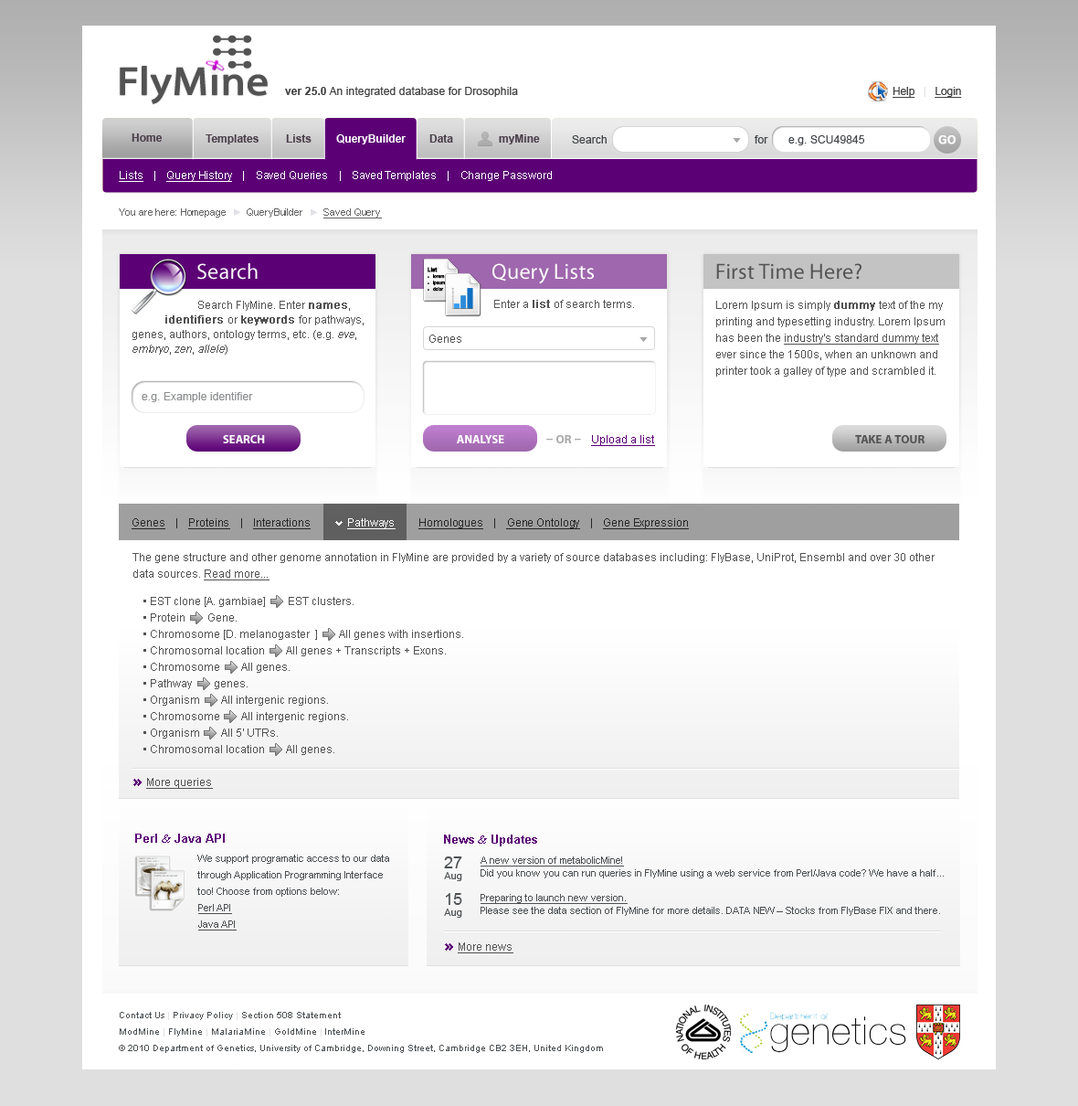
<style>
.page{position:relative;width:1078px;height:1106px;background:#ffffff}
.page>*{position:absolute;margin:0}
.t1{font:11px "ArialMT";letter-spacing:0.01em;color:#404040}
.t2{font:11px "Arial-BoldMT";letter-spacing:0.01em;color:#404040}
.t3{font:11px "ArialMT";letter-spacing:-0.01em;color:#404040;text-decoration:underline}
.t4{font:11px "ArialMT";letter-spacing:-0.01em;color:#e2e1e6}
.t5{font:11px "Arial-BoldMT";color:#4b3f4b}
.t6{font:11px "Arial-BoldMT";color:#ffffff}
.t7{font:11px "ArialMT";letter-spacing:0.01em;color:#424649}
.t8{font:6px "ArialMT";letter-spacing:0.01em;color:#a7a7a7;scale:1.67 1}
.t9{font:11px "Arial-BoldMT";letter-spacing:0.01em;color:#ffffff;text-transform:uppercase;font-weight:bold}
.t10{font:11px "ArialMT";letter-spacing:-0.01em;color:#ffffff}
.t11{font:11px "ArialMT";letter-spacing:-0.01em;color:#ffffff;text-decoration:underline}
.t12{font:10.1px "ArialMT";letter-spacing:-0.01em;color:#656565}
.t13{font:10.1px "ArialMT";color:#656565}
.t14{font:10.1px "ArialMT";letter-spacing:-0.01em;color:#e2e1e6}
.t15{font:10.1px "ArialMT";letter-spacing:-0.01em;color:#656565;text-decoration:underline}
.t16{font:21.9px "MyriadPro-Regular";letter-spacing:0.01em;color:#ffffff}
.t17{font:21.9px "MyriadPro-Regular";letter-spacing:0.01em;color:#535353}
.t18{font:11px/14.6px "ArialMT";color:#535353}
.t19{font:11px/14.6px "ArialMT";color:#535353;font-weight:bold}
.t20{font:11px/14.6px "ArialMT";color:#535353;font-style:italic}
.t21{font:11px "ArialMT";color:#535353}
.t22{font:11px "ArialMT";color:#535353;font-weight:bold}
.t23{font:11px/16.4px "ArialMT";color:#535353}
.t24{font:11px/16.4px "ArialMT";color:#535353;font-weight:bold}
.t25{font:11px/16.4px "ArialMT";color:#535353;text-decoration:underline}
.t26{font:11px "ArialMT";letter-spacing:0.01em;color:#8e9092}
.t27{font:11.9px "MyriadPro-Bold";color:#ffffff;text-transform:uppercase}
.t28{font:11.9px "MyriadPro-Bold";color:#a9a9a9;text-transform:uppercase}
.t29{font:11.9px "MyriadPro-Bold";color:#a9a9a9;text-transform:uppercase;scale:2 1}
.t30{font:11px "ArialMT";color:#5c0075;text-decoration:underline}
.t31{font:11.9px "MyriadPro-Bold";color:#535353;text-transform:uppercase}
.t32{font:11px "ArialMT";letter-spacing:-0.01em;color:#282626;text-decoration:underline}
.t33{font:11px "ArialMT";letter-spacing:-0.01em;color:#292727;text-decoration:underline}
.t34{font:11px "ArialMT";letter-spacing:-0.01em;color:#292727}
.t35{font:11px "ArialMT";letter-spacing:-0.01em;color:#282626}
.t36{font:11px "ArialMT";color:#535353;text-decoration:underline}
.t37{font:11.9px "Arial-BoldMT";color:#5c0075}
.t38{font:11.9px "TimesNewRomanPSMT";color:#5c0075;font-style:italic}
.t39{font:10.1px/16.4px "ArialMT";color:#4d5154}
.t40{font:10.1px/16.4px "ArialMT";color:#4d5154;text-decoration:underline}
.t41{font:10.1px/11px "ArialMT";color:#4d5154}
.t42{font:16.4px/11px "ArialMT";color:#4d5154}
.t43{font:16.4px/14.6px "ArialMT";color:#4d5154}
.t44{font:10.1px/12.8px "ArialMT";color:#4d5154}
.t45{font:10.1px/12.8px "ArialMT";color:#4d5154;text-decoration:underline}
.t46{font:10.1px/24.7px "ArialMT";color:#4d5154;text-decoration:underline}
.t47{font:9.1px/16.4px "ArialMT";color:#4d5154}
.t48{font:9.1px "ArialMT";letter-spacing:-0.01em;color:#e2e1e6}
.t49{font:9.1px "ArialMT";color:#4d5154}
</style>
<div class="page">
<p class="t1" style="left:285px;top:87px;width:233px;height:10px"><span class="t2">ver 25.0</span> An integrated database for Drosophila</p>
<p class="t3" style="left:893px;top:87px;width:69px;height:11px">Help   <span class="t4">|   </span>Login</p>
<p class="t5" style="left:132px;top:133px;width:31px;height:9px">Home</p>
<p class="t5" style="left:206px;top:134px;width:53px;height:10px">Templates</p>
<p class="t5" style="left:286px;top:134px;width:26px;height:9px">Lists</p>
<p class="t6" style="left:336px;top:134px;width:70px;height:10px">QueryBuilder</p>
<p class="t5" style="left:430px;top:134px;width:23px;height:9px">Data</p>
<p class="t5" style="left:499px;top:134px;width:41px;height:10px">myMine</p>
<p class="t7" style="left:572px;top:135px;width:35px;height:8px">Search</p>
<p class="t8" style="left:733px;top:138px;width:8px;height:5px">▼</p>
<p class="t7" style="left:755px;top:135px;width:14px;height:8px">for</p>
<p class="t7" style="left:789px;top:135px;width:76px;height:10px">e.g. SCU49845</p>
<p class="t9" style="left:939px;top:135px;width:17px;height:9px">Go</p>
<p class="t10" style="left:119px;top:171px;width:433px;height:11px"><span class="t11">Lists    </span>|    <span class="t11">Query History    </span>|    Saved Queries    |    Saved Templates    |    Change Password</p>
<p class="t12" style="left:119px;top:208px;width:263px;height:10px">You <span class="t13">ar</span>e here: Homepage  <span class="t14">►  </span>QueryBuilder  <span class="t14">►  </span><span class="t15">Saved Query</span></p>
<p class="t16" style="left:197px;top:263px;width:61px;height:17px">Search</p>
<p class="t16" style="left:493px;top:263px;width:101px;height:21px">Query Lists</p>
<p class="t17" style="left:716px;top:263px;width:146px;height:17px">First Time Here?</p>
<p class="t18" style="left:133px;top:301px;width:231px;height:54px">Search FlyMine. Enter <span class="t19">names</span>,<br><span class="t19"> identifiers </span>or <span class="t19">keywords </span>for pathways,<br>genes, authors, ontology terms, etc. (e.g. <span class="t20">eve</span>,<br><span class="t20">embryo</span>, <span class="t20">zen</span>, <span class="t20">allele</span>)</p>
<p class="t21" style="left:494px;top:300px;width:140px;height:8px">Enter a <span class="t22">list </span>of search terms.</p>
<p class="t23" style="left:716px;top:301px;width:229px;height:76px">Lorem Ipsum is simply <span class="t24">dummy </span>text of the my<br>printing and typesetting industry. Lorem Ipsum<br>has been the <span class="t25">industry's standard dummy text<br></span>ever since the 1500s, when an unknown and<br>printer took a galley of type and scrambled it.</p>
<p class="t21" style="left:430px;top:334px;width:32px;height:9px">Genes</p>
<p class="t8" style="left:640px;top:337px;width:8px;height:5px">▼</p>
<p class="t26" style="left:142px;top:392px;width:111px;height:10px">e.g. Example identifier</p>
<p class="t27" style="left:223px;top:435px;width:42px;height:8px">Search</p>
<p class="t27" style="left:457px;top:435px;width:47px;height:8px">Analyse</p>
<p class="t28" style="left:546px;top:435px;width:35px;height:8px"><span class="t29">-</span> OR <span class="t29">-</span></p>
<p class="t30" style="left:591px;top:435px;width:64px;height:11px">Upload a list</p>
<p class="t31" style="left:855px;top:435px;width:70px;height:8px">take a tour</p>
<p class="t32" style="left:132px;top:518px;width:557px;height:11px"><span class="t33">Genes    </span><span class="t34">|    </span><span class="t33">Proteins    </span><span class="t34">|    </span><span class="t33">Interactions              </span><span class="t11">Pathways         </span>Homologues    <span class="t35">|    </span>Gene Ontology    <span class="t35">|    </span>Gene Expression</p>
<p class="t23" style="left:133px;top:553px;width:802px;height:27px">The gene structure and other genome annotation in FlyMine are provided by a variety of source databases including: FlyBase, UniProt, Ensembl and over 30 other<br>data sources. <span class="t25">Read more...</span></p>
<p class="t23" style="left:143px;top:597px;width:320px;height:158px">• EST clone [A. gambiae]        EST clusters.<br>    • Protein        Gene.<br>    • Chromosome [D. melanogaster  ]        All genes with insertions.<br>    • Chromosomal location        All genes + Transcripts + Exons.<br>    • Chromosome        All genes.<br>    • Pathway        genes.<br>    • Organism        All intergenic regions.<br>    • Chromosome        All intergenic regions.<br>    • Organism        All 5' UTRs.<br>    • Chromosomal location        All genes.</p>
<p class="t36" style="left:146px;top:778px;width:67px;height:11px">More queries</p>
<p class="t37" style="left:135px;top:833px;width:90px;height:10px">Perl <span class="t38">&amp;</span> Java API</p>
<p class="t37" style="left:444px;top:834px;width:93px;height:12px">News <span class="t38">&amp;</span> Updates</p>
<p class="t39" style="left:197px;top:854px;width:192px;height:76px">We support programatic access to our data<br>through Application Programming Interface<br>too! Choose from options below:<br><span class="t40">Perl API<br>Java API</span></p>
<p class="t41" style="left:444px;top:856px;width:18px;height:62px;text-align:center"><span class="t42">27<br></span>Aug<br><br><span class="t43">15<br></span>Aug</p>
<p class="t44" style="left:481px;top:856px;width:463px;height:60px"><span class="t45">A new version of metabolicMine!<br></span>Did you know you can run queries in FlyMine using a web service from Perl/Java code? We have a half...<br><span class="t46">Preparing to launch new version.<br></span>Please see the data section of FlyMine for more details. DATA NEW – Stocks from FlyBase FIX and there.</p>
<p class="t36" style="left:458px;top:942px;width:56px;height:11px">More news</p>
<p class="t47" style="left:120px;top:1012px;width:245px;height:24px">Contact Us <span class="t48">| </span>Privacy Policy <span class="t48">| </span>Section 508 Statement<br>ModMine <span class="t48">|</span> FlyMine <span class="t48">| </span>MalariaMine <span class="t48">| </span>GoldMine <span class="t48">| </span>InterMine</p>
<p class="t49" style="left:119px;top:1045px;width:484px;height:8px">© 2010 Department of Genetics, University of Cambridge, Downing Street, Cambridge CB2 3EH, United Kingdom</p>
</div>
